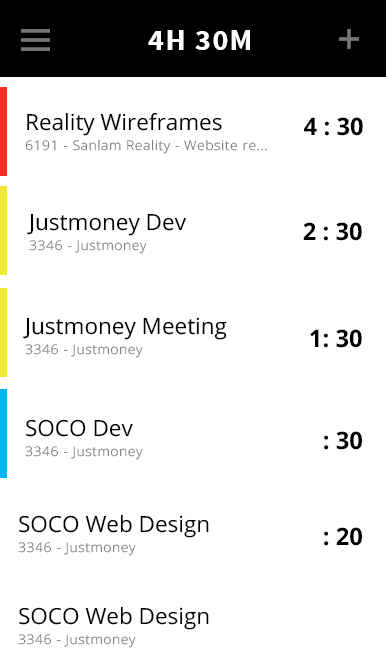
<style>
.page{position:relative;width:386px;height:658px;background:#ffffff}
.page>*{position:absolute;margin:0}
.t1{font:29.7px "SourceSansPro-Bold";letter-spacing:0.06em;color:#ffffff}
.t2{font:22.2px "OpenSans";color:#000000}
.t3{font:24.1px "OpenSans-Bold";color:#000000}
.t4{font:13.3px "OpenSans-Light";letter-spacing:0.04em;scale:1.05 1}
</style>
<div class="page">
<p class="t1" style="left:148px;top:30px;width:102px;height:20px">4H 30M</p>
<p class="t2" style="left:27px;top:112px;width:195px;height:24px">Reality Wireframes</p>
<p class="t3" style="left:304px;top:117px;width:59px;height:19px">4 : 30</p>
<p class="t4" style="left:25px;top:139px;width:242px;height:15px">6191 - Sanlam Reality - Website re...</p>
<p class="t2" style="left:27px;top:213px;width:159px;height:23px">Justmoney Dev</p>
<p class="t3" style="left:303px;top:222px;width:59px;height:19px">2 : 30</p>
<p class="t4" style="left:29px;top:240px;width:118px;height:14px">3346 - Justmoney</p>
<p class="t2" style="left:23px;top:317px;width:204px;height:23px">Justmoney Meeting</p>
<p class="t3" style="left:310px;top:329px;width:52px;height:19px">1: 30</p>
<p class="t4" style="left:25px;top:344px;width:118px;height:14px">3346 - Justmoney</p>
<p class="t2" style="left:26px;top:419px;width:107px;height:18px">SOCO Dev</p>
<p class="t3" style="left:324px;top:431px;width:38px;height:19px">: 30</p>
<p class="t4" style="left:25px;top:446px;width:118px;height:14px">3346 - Justmoney</p>
<p class="t2" style="left:19px;top:514px;width:190px;height:24px">SOCO Web Design</p>
<p class="t3" style="left:324px;top:527px;width:38px;height:19px">: 20</p>
<p class="t4" style="left:18px;top:542px;width:118px;height:14px">3346 - Justmoney</p>
<p class="t2" style="left:19px;top:606px;width:190px;height:24px">SOCO Web Design</p>
<p class="t4" style="left:18px;top:634px;width:118px;height:14px">3346 - Justmoney</p>
</div>
